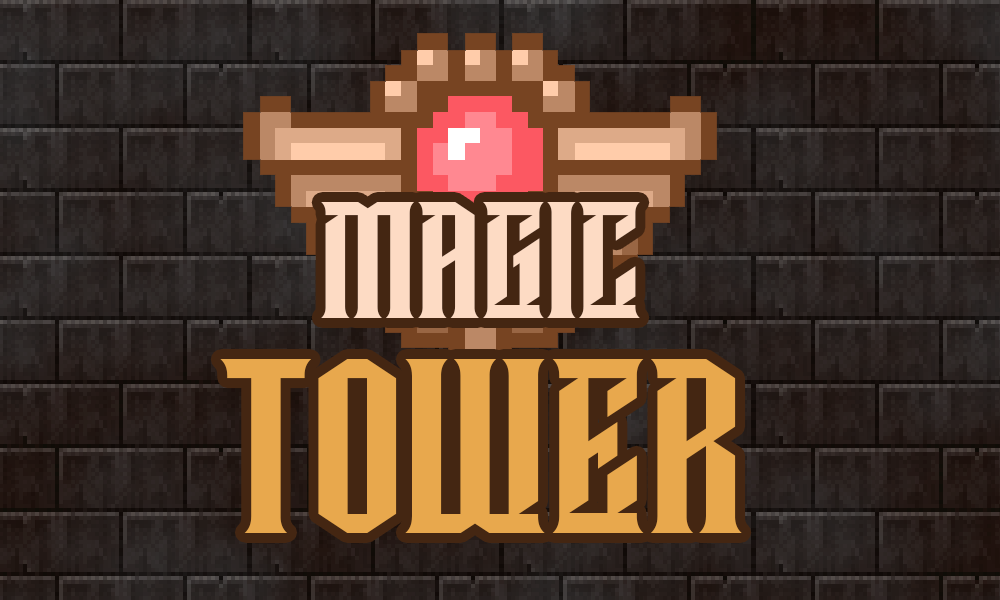
<style>
.page{position:relative;width:1000px;height:600px}
.page>*{position:absolute;margin:0}
.t1{font:166.7px "Damages-Regular";color:#fddbc4}
.t2{font:250px "Damages-Regular";color:#e8a84d}
</style>
<div class="page">
<p class="t1" style="left:321px;top:202px;width:319px;height:116px">Magic</p>
<p class="t2" style="left:220px;top:359px;width:522px;height:174px">Tower</p>
</div>
